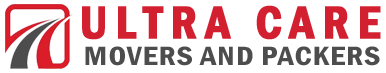
<style>
.page{position:relative;width:386px;height:73px;background:#ffffff}
.page>*{position:absolute;margin:0}
.t1{font:47.6px "FranklinGothic-DemiCond";letter-spacing:0.15em;color:#d22031;text-transform:uppercase;font-weight:bold}
.t2{font:27.4px "FranklinGothic-DemiCond";letter-spacing:0.025em;color:#4d4d4d;text-transform:uppercase;scale:1.16 1}
</style>
<div class="page">
<p class="t1" style="left:82px;top:5px;width:299px;height:35px">ultra care</p>
<p class="t2" style="left:85px;top:46px;width:295px;height:20px">Movers And Packers</p>
</div>
